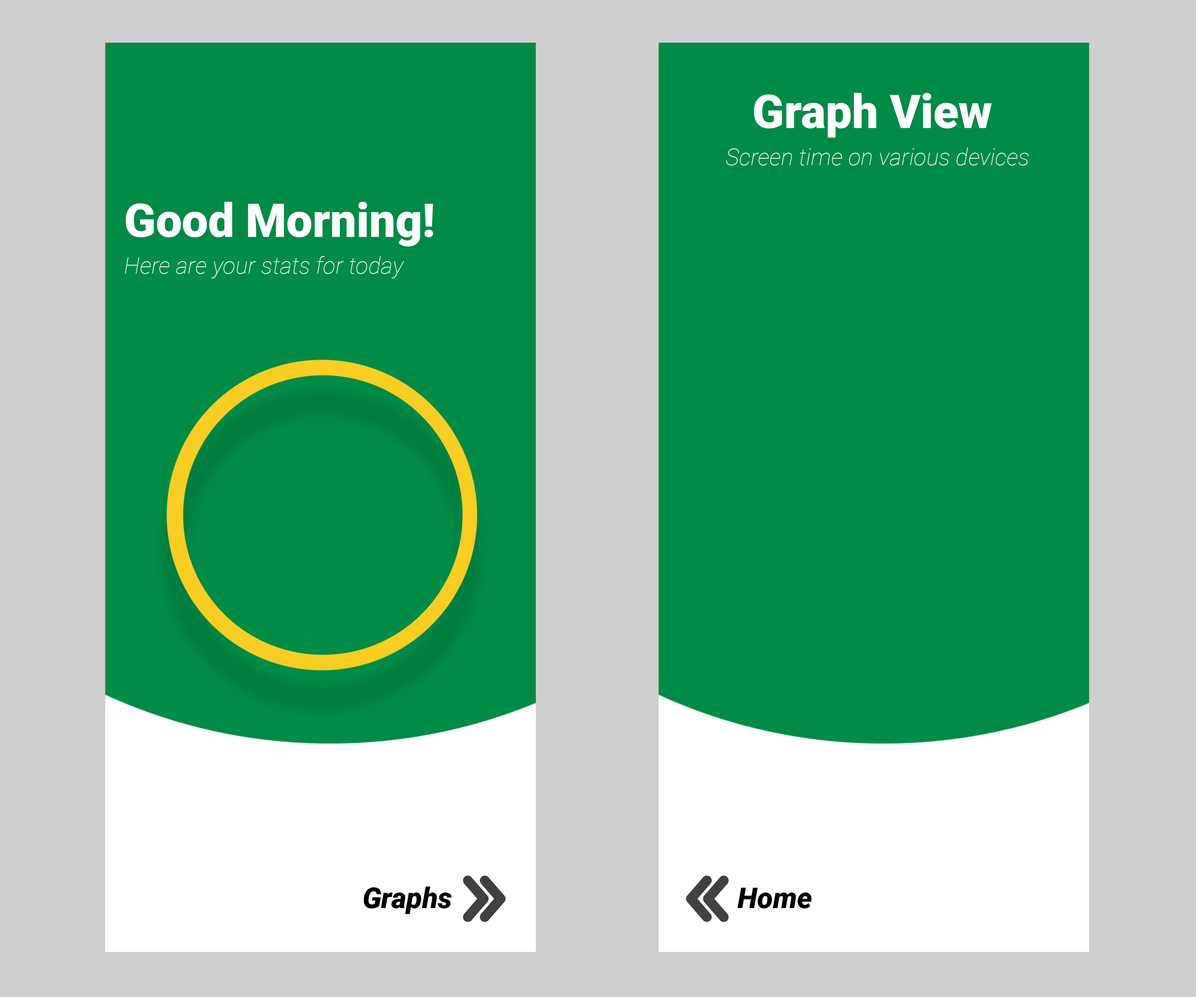
<style>
.page{position:relative;width:1196px;height:997px;background:#008b47}
.page>*{position:absolute;margin:0}
.t1{font:46.5px "Roboto-Black";color:#ffffff}
.t2{font:23.3px "Roboto-ThinItalic";color:#ffffff}
.t3{font:28.7px "Roboto-BlackItalic";color:#000000}
</style>
<div class="page">
<p class="t1" style="left:754px;top:93px;width:238px;height:45px">Graph View</p>
<p class="t2" style="left:726px;top:148px;width:303px;height:17px">Screen time on various devices</p>
<p class="t1" style="left:126px;top:202px;width:307px;height:44px">Good Morning!</p>
<p class="t2" style="left:125px;top:256px;width:279px;height:22px">Here are your stats for today</p>
<p class="t3" style="left:364px;top:886px;width:88px;height:28px">Graphs</p>
<p class="t3" style="left:738px;top:888px;width:74px;height:20px">Home</p>
</div>
